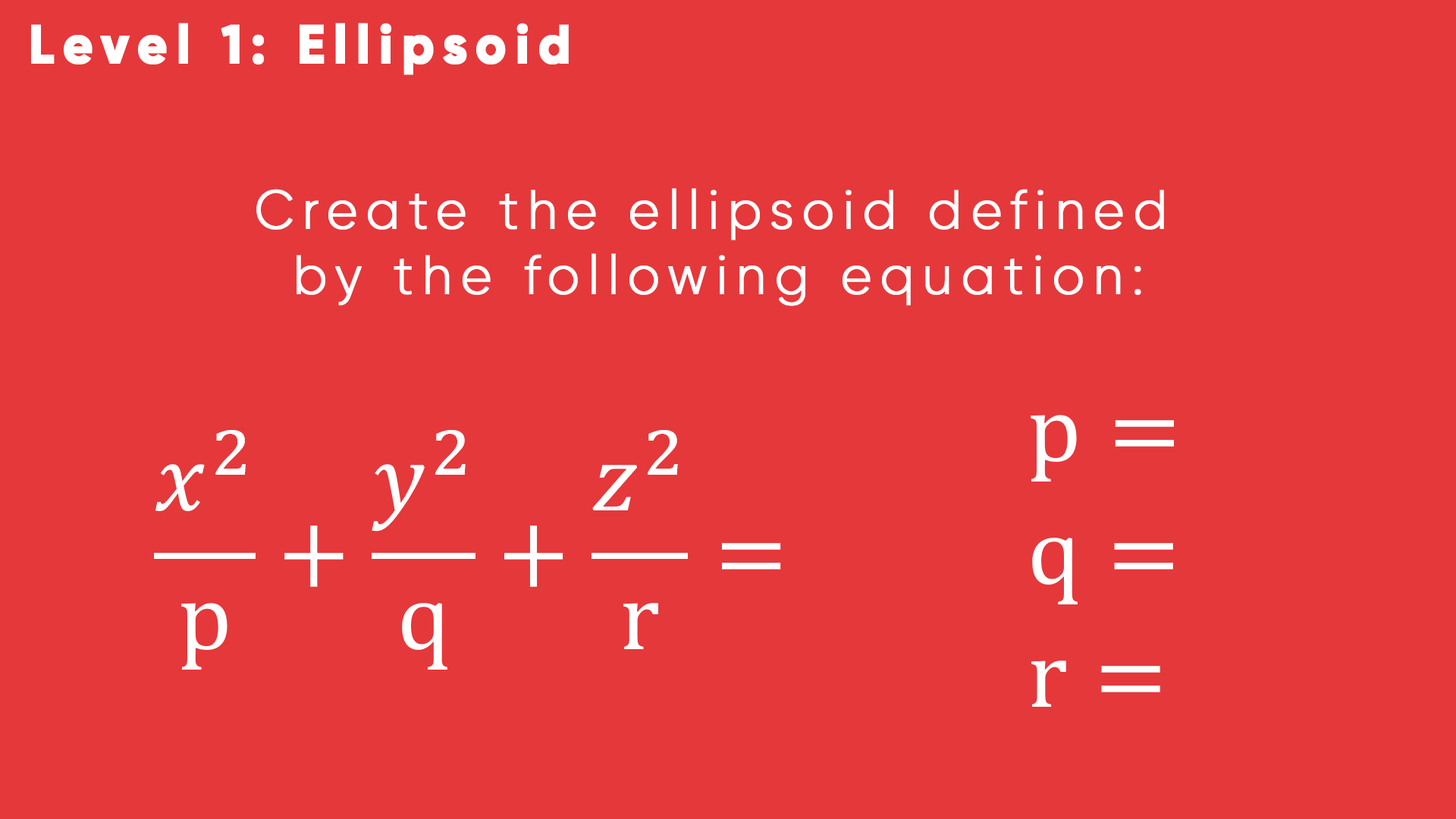
<style>
.page{position:relative;width:1456px;height:819px;background:#e5383b}
.page>*{position:absolute;margin:0}
.t1{font:54.6px "Gilroy-ExtraBold";letter-spacing:0.15em;color:#ffffff;font-weight:bold;scale:0.95 1}
.t2{font:54.6px "Gilroy-Light";letter-spacing:0.15em;color:#ffffff;font-weight:bold;scale:0.95 1}
</style>
<div class="page">
<p class="t1" style="left:31px;top:23px;width:538px;height:52px">Level 1: Ellipsoid</p>
<p class="t2" style="left:256px;top:188px;width:908px;height:118px;text-align:center">Create the ellipsoid defined <br>by the following equation:</p>
</div>
